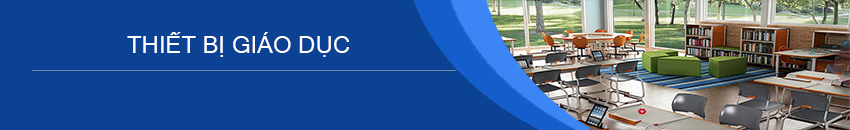
<style>
.page{position:relative;width:850px;height:130px;background:#0c4294}
.page>*{position:absolute;margin:0}
.t1{font:24px "MicrosoftSansSerif";color:#ffffff}
</style>
<div class="page">
<p class="t1" style="left:127px;top:32px;width:222px;height:25px">THIẾT BỊ GIÁO DỤC</p>
</div>
